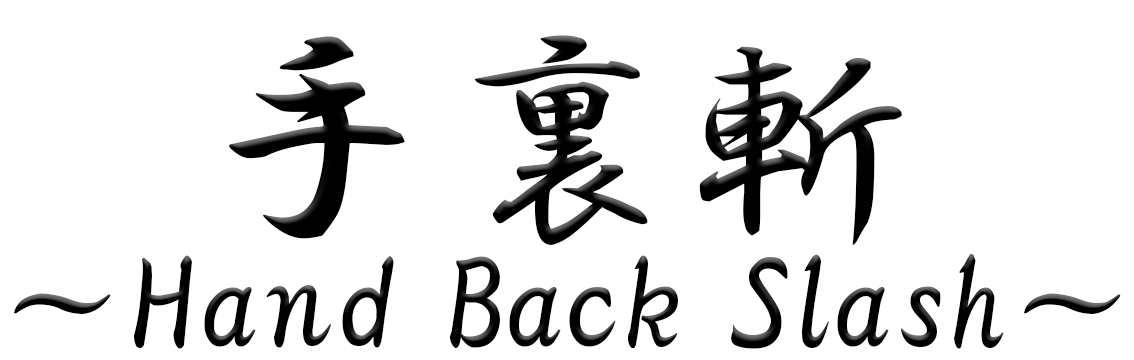
<style>
.page{position:relative;width:1134px;height:360px;background:#ffffff}
.page>*{position:absolute;margin:0}
.t1{font:241.5px "HGPGyoshotai";color:#000000}
.t2{font:127.9px "HGPGyoshotai";color:#000000}
</style>
<div class="page">
<p class="t1" style="left:229px;top:35px;width:673px;height:210px">手裏斬</p>
<p class="t2" style="left:13px;top:253px;width:1108px;height:96px">～Hand Back Slash～</p>
</div>
